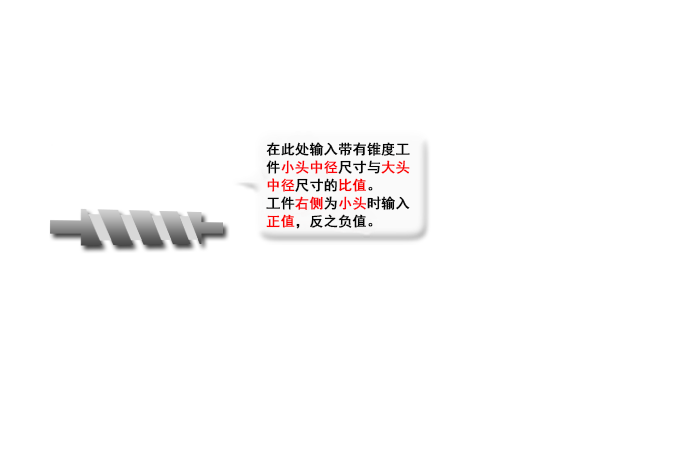
<style>
.page{position:relative;width:700px;height:465px;background:#ffffff}
.page>*{position:absolute;margin:0}
.t1{font:14px/18px "SimHei";color:#050505;font-weight:bold}
.t2{font:14px/18px "SimHei";color:#fb0208;font-weight:bold}
.t3{font:14px/18px "SimHei";color:#fa0505;font-weight:bold}
.t4{font:14px/18px "SimHei";color:#f90101;font-weight:bold}
.t5{font:14px/18px "SimHei";color:#f9050b;font-weight:bold}
.t6{font:14px/18px "SimHei";color:#fd0309;font-weight:bold}
.t7{font:14px/18px "SimHei";color:#fd0101;font-weight:bold}
</style>
<div class="page">
<p class="t1" style="left:266px;top:142px;width:144px;height:87px">在此处输入带有锥度工件<span class="t2">小头中径</span>尺寸与<span class="t3">大头中径</span>尺寸的<span class="t4">比值</span>。<br>工件<span class="t5">右侧</span>为<span class="t6">小头</span>时输入<span class="t7">正值</span>，反之负值。</p>
</div>
